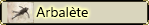
<style>
.page{position:relative;width:149px;height:25px;background:#d9d5bd}
.page>*{position:absolute;margin:0}
.t1{font:14px "LaoUI";color:#000000}
</style>
<div class="page">
<p class="t1" style="left:36px;top:7px;width:52px;height:10px">Arbalète</p>
</div>
